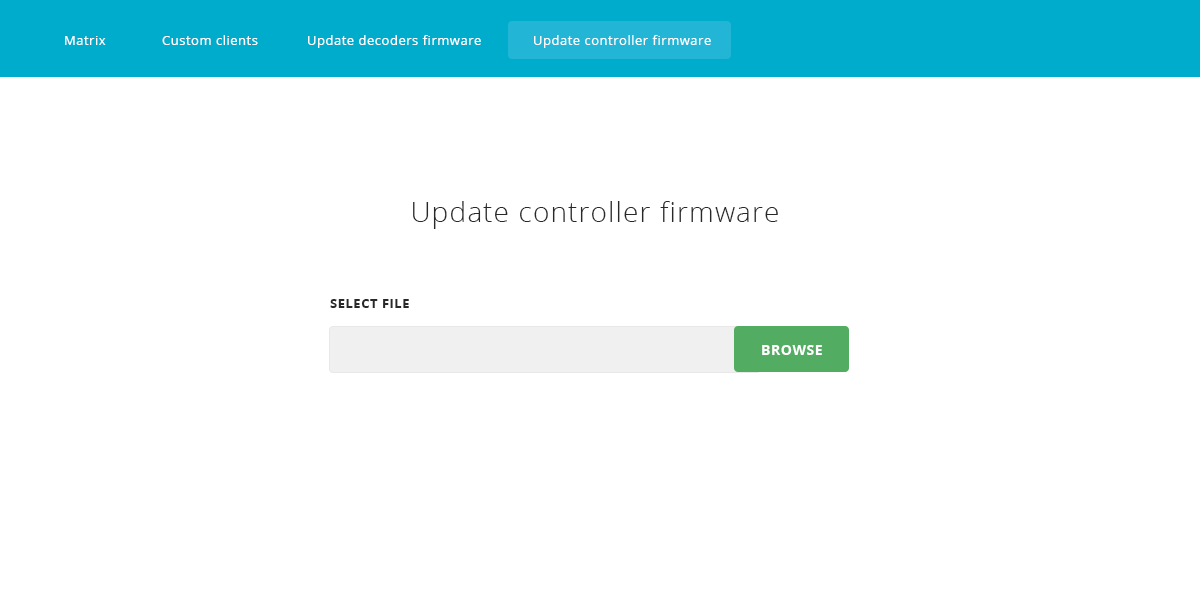
<style>
.page{position:relative;width:1200px;height:595px;background:#ffffff}
.page>*{position:absolute;margin:0}
.t1{font:13px "OpenSans";letter-spacing:0.04em;color:#ffffff}
.t2{font:28px "OpenSans-Light";letter-spacing:0.04em;color:#282828}
.t3{font:13px "OpenSans-Bold";letter-spacing:0.04em;color:#282828;text-transform:uppercase}
.t4{font:14px "OpenSans-Bold";letter-spacing:0.04em;color:#ffffff;text-transform:uppercase}
</style>
<div class="page">
<p class="t1" style="left:65px;top:36px;width:41px;height:9px">Matrix</p>
<p class="t1" style="left:162px;top:35px;width:96px;height:10px">Custom clients</p>
<p class="t1" style="left:308px;top:35px;width:173px;height:13px">Update decoders firmware</p>
<p class="t1" style="left:534px;top:35px;width:177px;height:13px">Update controller firmware</p>
<p class="t2" style="left:413px;top:201px;width:365px;height:28px">Update controller firmware</p>
<p class="t3" style="left:330px;top:299px;width:79px;height:9px">Select File</p>
<p class="t4" style="left:762px;top:345px;width:60px;height:10px">browse</p>
</div>
